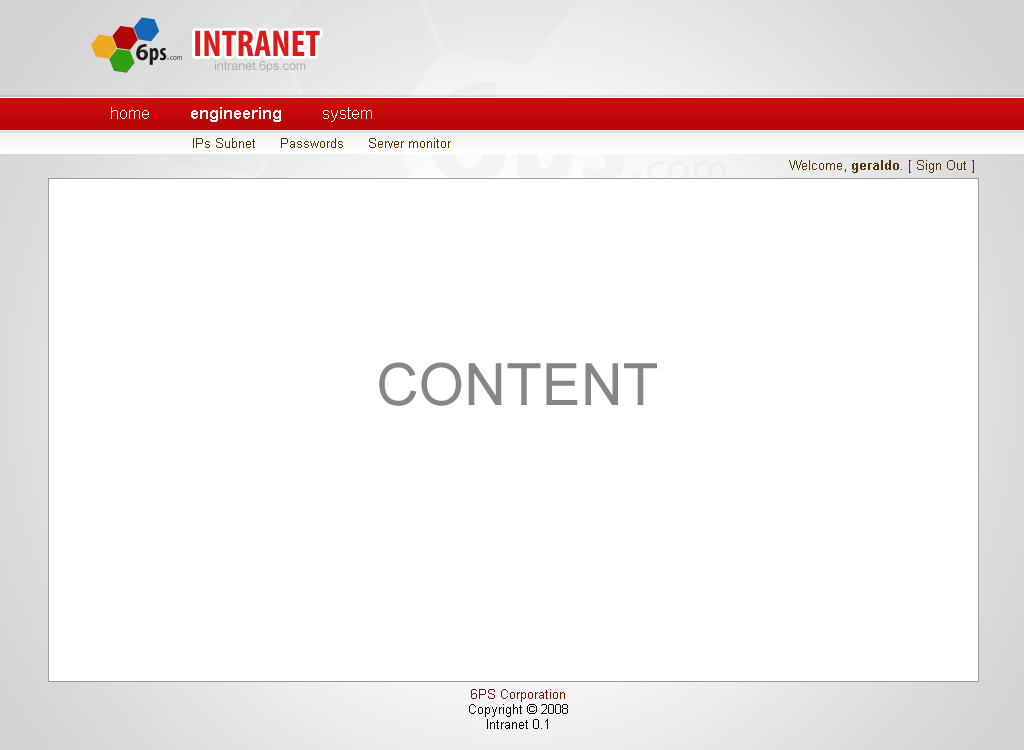
<style>
.page{position:relative;width:1024px;height:750px;background:#ffffff}
.page>*{position:absolute;margin:0}
.t1{font:12.5px "ArialMT";color:#adadad}
.t2{font:16.7px "Arial-BoldMT";color:#ffffff}
.t3{font:16.7px "ArialMT";color:#ffffff}
.t4{font:12.5px "ArialMT";color:#503500}
.t5{font:12.5px "Arial-BoldMT";color:#503500}
.t6{font:58.3px "ArialMT";color:#868686}
.t7{font:12.5px "ArialMT";color:#000000}
.t8{font:12.5px "ArialMT";color:#860707}
</style>
<div class="page">
<p class="t1" style="left:215px;top:61px;width:91px;height:12px">intranet.6ps.com</p>
<p class="t2" style="left:111px;top:107px;width:261px;height:15px"><span class="t3"><br>home        </span>engineering<span class="t3">        system</span></p>
<p class="t4" style="left:193px;top:138px;width:258px;height:10px">IPs Subnet      Passwords      Server monitor</p>
<p class="t4" style="left:789px;top:160px;width:185px;height:13px">Welcome, <span class="t5">geraldo</span>. [ Sign Out ]</p>
<p class="t6" style="left:379px;top:362px;width:278px;height:44px">CONTENT</p>
<p class="t7" style="left:469px;top:689px;width:99px;height:40px;text-align:center"><span class="t8">6PS Corporation<br></span>Copyright © 2008<br>Intranet 0.1</p>
</div>
